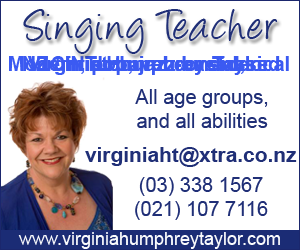
<style>
.page{position:relative;width:300px;height:250px;background:#ffffff}
.page>*{position:absolute;margin:0}
.t1{font:50px "Angelina";color:#202f77}
.t2{font:20px "Arial-BoldMT";color:#3b5af2}
.t3{font:20px "ArialMT";color:#202f77}
.t4{font:20.8px "Arial-BoldMT";color:#202f77}
.t5{font:18px "ArialMT";color:#f9fafc}
</style>
<div class="page">
<p class="t1" style="left:23px;top:9px;width:255px;height:45px">Singing Teacher</p>
<p class="t2" style="left:9px;top:56px;width:280px;height:19px">Modern, pop, jazz or classical</p>
<p class="t2" style="left:23px;top:56px;width:257px;height:15px">NZ / INTL travel considered</p>
<p class="t2" style="left:27px;top:56px;width:244px;height:19px">Virginia Humphrey-Taylor</p>
<p class="t2" style="left:51px;top:56px;width:193px;height:18px">Christchurch-based;</p>
<p class="t3" style="left:135px;top:89px;width:133px;height:39px;text-align:center">All age groups,<br>and all abilities</p>
<p class="t4" style="left:85px;top:147px;width:212px;height:20px">virginiaht@xtra.co.nz</p>
<p class="t3" style="left:135px;top:177px;width:133px;height:43px;text-align:center">(03) 338 1567<br>(021) 107 7116</p>
<p class="t5" style="left:18px;top:232px;width:262px;height:17px">www.virginiahumphreytaylor.com</p>
</div>
